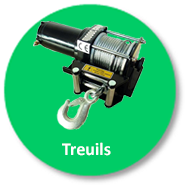
<style>
.page{position:relative;width:185px;height:185px;background:#00cc66}
.page>*{position:absolute;margin:0}
.t1{font:18px "Calibri-Bold";color:#ffffff}
</style>
<div class="page">
<p class="t1" style="left:62px;top:142px;width:49px;height:14px">Treuils</p>
</div>
